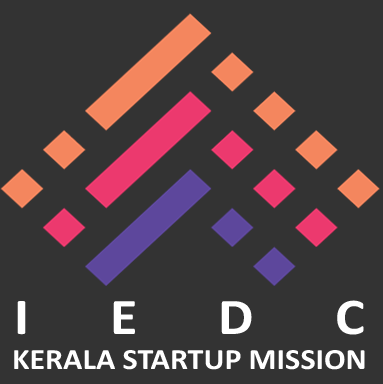
<style>
.page{position:relative;width:383px;height:384px;background:#333333}
.page>*{position:absolute;margin:0}
.t1{font:29.5px "Calibri-Bold";color:#ffffff;text-transform:uppercase;scale:1.08 1}
.t2{font:52px "Calibri-Bold";letter-spacing:1.44em;color:#ffffff;text-transform:uppercase;scale:1.08 1}
</style>
<div class="page">
<p class="t1" style="left:14px;top:300px;width:351px;height:70px;text-align:center"><span class="t2">IEDC<br></span>Kerala Startup Mission</p>
</div>
